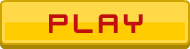
<style>
.page{position:relative;width:190px;height:49px;background:#ffd948}
.page>*{position:absolute;margin:0}
.t1{font:30px "KenVector-Future";color:#c10f0f}
</style>
<div class="page">
<p class="t1" style="left:49px;top:14px;width:94px;height:19px">Play</p>
</div>
